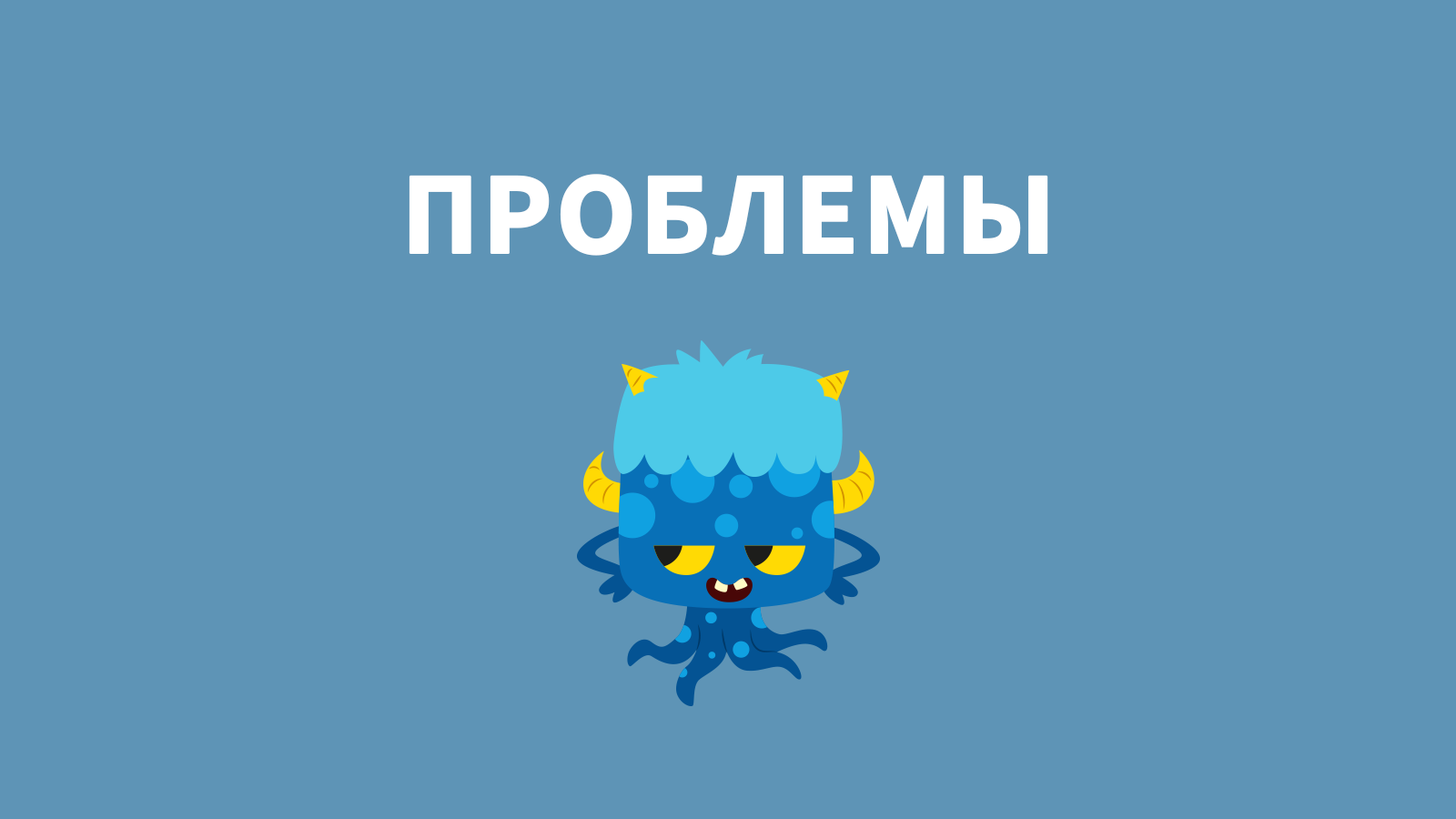
<style>
.page{position:relative;width:1456px;height:819px;background:#5e94b6}
.page>*{position:absolute;margin:0}
.t1{font:117.8px "SourceSansPro-Bold";color:#ffffff;text-transform:uppercase;font-weight:bold}
</style>
<div class="page">
<p class="t1" style="left:409px;top:174px;width:639px;height:82px">Проблемы</p>
</div>
